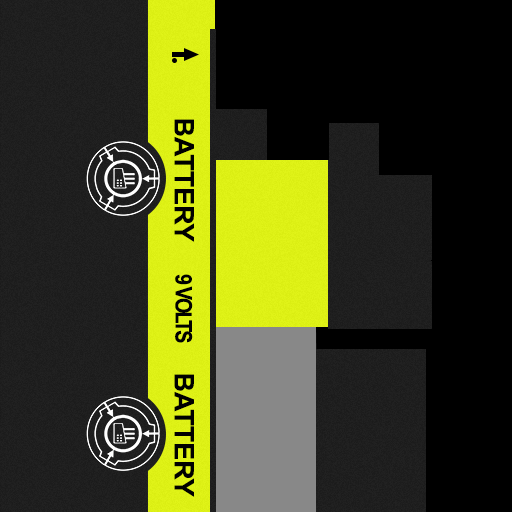
<style>
.page{position:relative;width:512px;height:512px;background:#000000}
.page>*{position:absolute;margin:0}
.t1{font:26.9px "Arial-BoldMT";color:#000000}
.t2{font:22.7px "Arial-BoldMT";letter-spacing:-0.1em;color:#000000;scale:0.87 1}
</style>
<div class="page">
<p class="t1" style="left:174px;top:119px;width:20px;height:123px;rotate:90deg">BATTERY</p>
<p class="t2" style="left:175px;top:274px;width:18px;height:69px;rotate:90deg">9 VOLTS</p>
<p class="t1" style="left:174px;top:374px;width:20px;height:123px;rotate:90deg">BATTERY</p>
</div>
